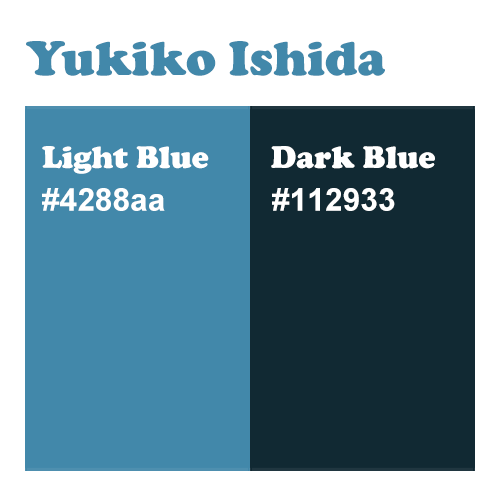
<style>
.page{position:relative;width:500px;height:500px;background:#ffffff}
.page>*{position:absolute;margin:0}
.t1{font:50px "CooperBlack";color:#4288aa}
.t2{font:31.8px "CooperBlack";color:#ffffff}
.t3{font:31.8px "Arial-BoldMT";color:#ffffff}
</style>
<div class="page">
<p class="t1" style="left:26px;top:41px;width:359px;height:35px">Yukiko Ishida</p>
<p class="t2" style="left:42px;top:146px;width:167px;height:28px">Light Blue</p>
<p class="t2" style="left:271px;top:146px;width:164px;height:23px">Dark Blue</p>
<p class="t3" style="left:42px;top:188px;width:123px;height:23px">#4288aa</p>
<p class="t3" style="left:272px;top:188px;width:123px;height:23px">#112933</p>
</div>
